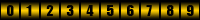
<style>
.page{position:relative;width:200px;height:20px;background:#000000}
.page>*{position:absolute;margin:0}
.t1{font:14px "Impact";color:#000000}
</style>
<div class="page">
<p class="t1" style="left:7px;top:5px;width:7px;height:11px">0</p>
<p class="t1" style="left:26px;top:5px;width:6px;height:11px">1</p>
<p class="t1" style="left:46px;top:5px;width:8px;height:11px">2</p>
<p class="t1" style="left:66px;top:5px;width:8px;height:11px">3</p>
<p class="t1" style="left:86px;top:5px;width:8px;height:11px">4</p>
<p class="t1" style="left:106px;top:5px;width:8px;height:11px">5</p>
<p class="t1" style="left:127px;top:5px;width:7px;height:11px">6</p>
<p class="t1" style="left:146px;top:5px;width:6px;height:11px">7</p>
<p class="t1" style="left:167px;top:5px;width:7px;height:11px">8</p>
<p class="t1" style="left:187px;top:5px;width:7px;height:11px">9</p>
</div>
